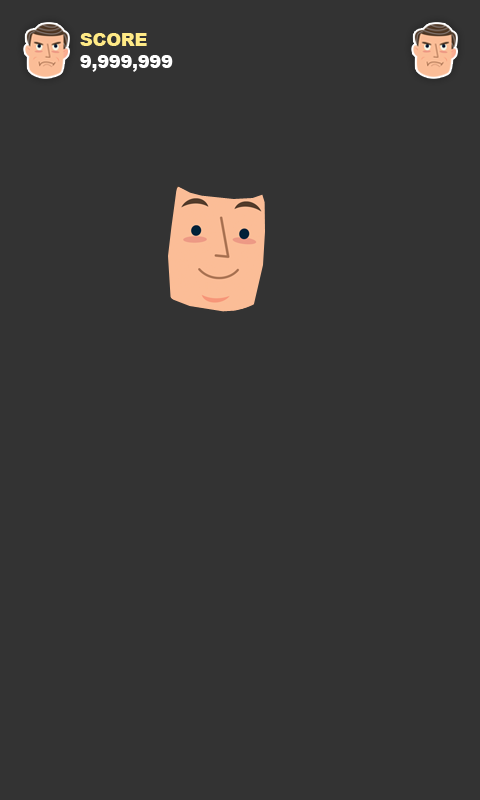
<style>
.page{position:relative;width:480px;height:800px;background:#333333}
.page>*{position:absolute;margin:0}
.t1{font:18px "Arial-Black";letter-spacing:-0.02em;color:#ffffff}
.t2{font:18px "Arial-Black";letter-spacing:-0.02em;color:#ffea86}
</style>
<div class="page">
<p class="t1" style="left:80px;top:33px;width:93px;height:39px"><span class="t2">SCORE<br></span>9,999,999</p>
</div>
